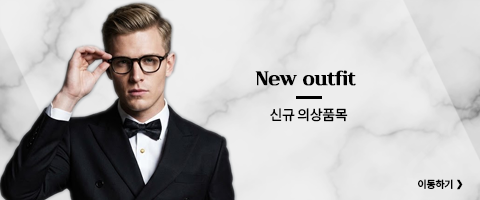
<style>
.page{position:relative;width:480px;height:200px}
.page>*{position:absolute;margin:0}
.t1{font:20px "Cafe24Danjunghae";letter-spacing:-0.025em;color:#000000;font-weight:bold}
.t2{font:14px "NotoSansKR-Regular";letter-spacing:-0.025em;color:#000000;font-weight:bold}
.t3{font:10px "NotoSansKR-Medium";letter-spacing:-0.025em;color:#000000;font-weight:bold}
.t4{font:12px "KBLJump_BTTF";letter-spacing:-0.025em;color:#000000;font-weight:bold}
</style>
<div class="page">
<p class="t1" style="left:255px;top:70px;width:101px;height:16px">New outfit</p>
<p class="t2" style="left:270px;top:108px;width:78px;height:14px">신규 의상품목</p>
<p class="t3" style="left:418px;top:179px;width:35px;height:10px">이동하기</p>
<p class="t4" style="left:457px;top:179px;width:6px;height:11px">&gt;</p>
</div>
